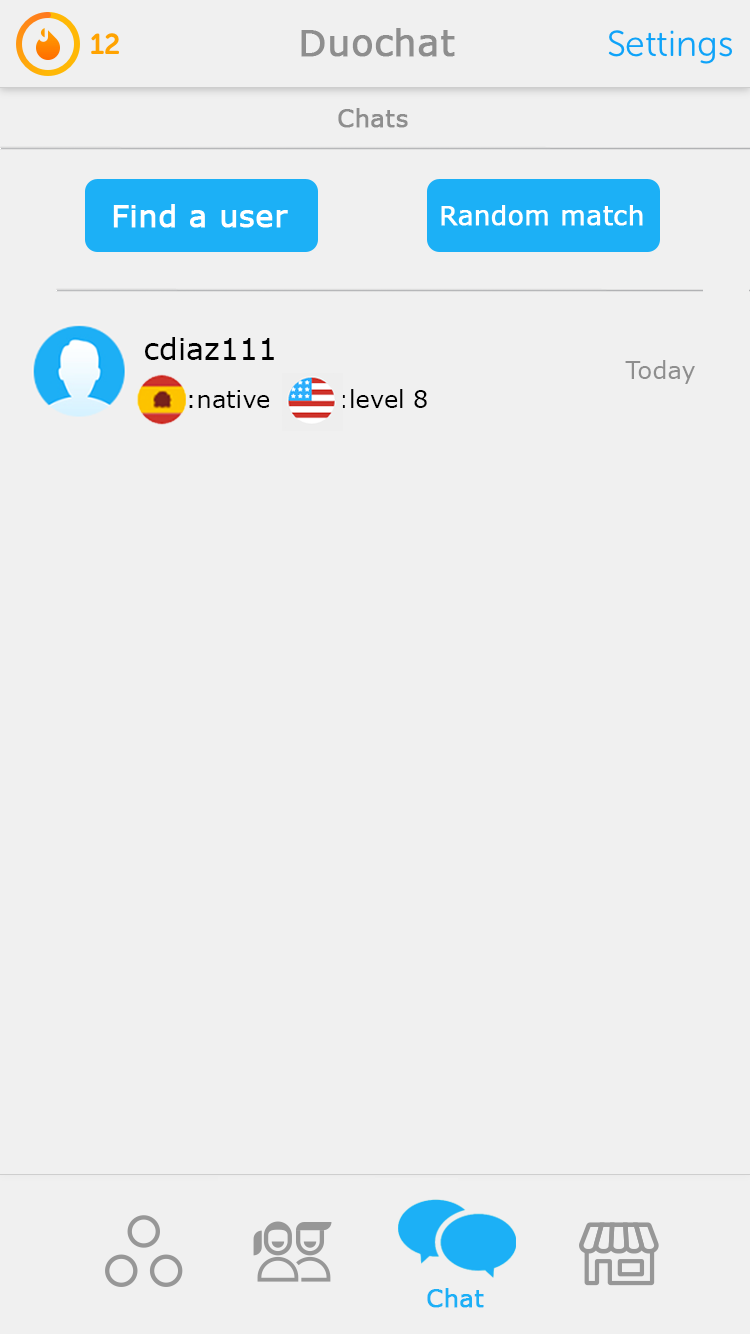
<style>
.page{position:relative;width:750px;height:1334px;background:#f0f0f0}
.page>*{position:absolute;margin:0}
.t1{font:36px "MSReferenceSansSerif";color:#8e8e8e;font-weight:bold}
.t2{font:24px "MSReferenceSansSerif";color:#8e8e8e;font-weight:bold}
.t3{font:24px/48px "MSReferenceSansSerif";color:#000000}
.t4{font:30px/48px "MSReferenceSansSerif";color:#000000}
.t5{font:24px "MSReferenceSansSerif";color:#8e8e8e}
.t6{font:24px "MSReferenceSansSerif";color:#1cb0f6;font-weight:bold}
</style>
<div class="page">
<p class="t1" style="left:301px;top:28px;width:154px;height:29px">Duochat</p>
<p class="t2" style="left:338px;top:108px;width:70px;height:20px">Chats</p>
<p class="t3" style="left:145px;top:337px;width:282px;height:71px"><span class="t4">cdiaz111<br>    </span>:native        :level 8</p>
<p class="t5" style="left:625px;top:360px;width:70px;height:24px">Today</p>
<p class="t6" style="left:427px;top:1288px;width:57px;height:20px">Chat</p>
</div>
